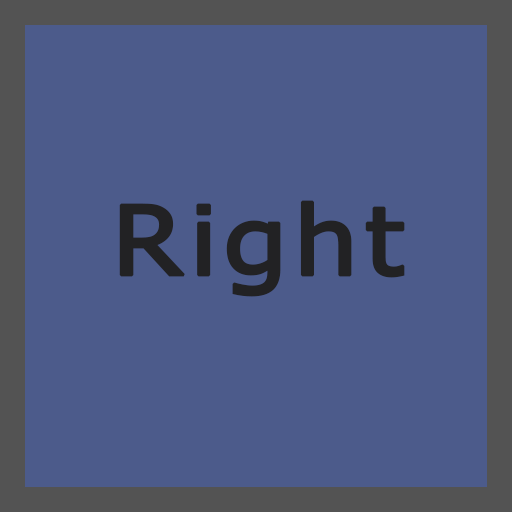
<style>
.page{position:relative;width:512px;height:512px;background:#4c5b8b}
.page>*{position:absolute;margin:0}
.t1{font:96.3px "Tahoma";letter-spacing:0.05em;color:#222224;font-weight:bold;scale:1.16 1}
</style>
<div class="page">
<p class="t1" style="left:119px;top:200px;width:286px;height:97px">Right</p>
</div>
